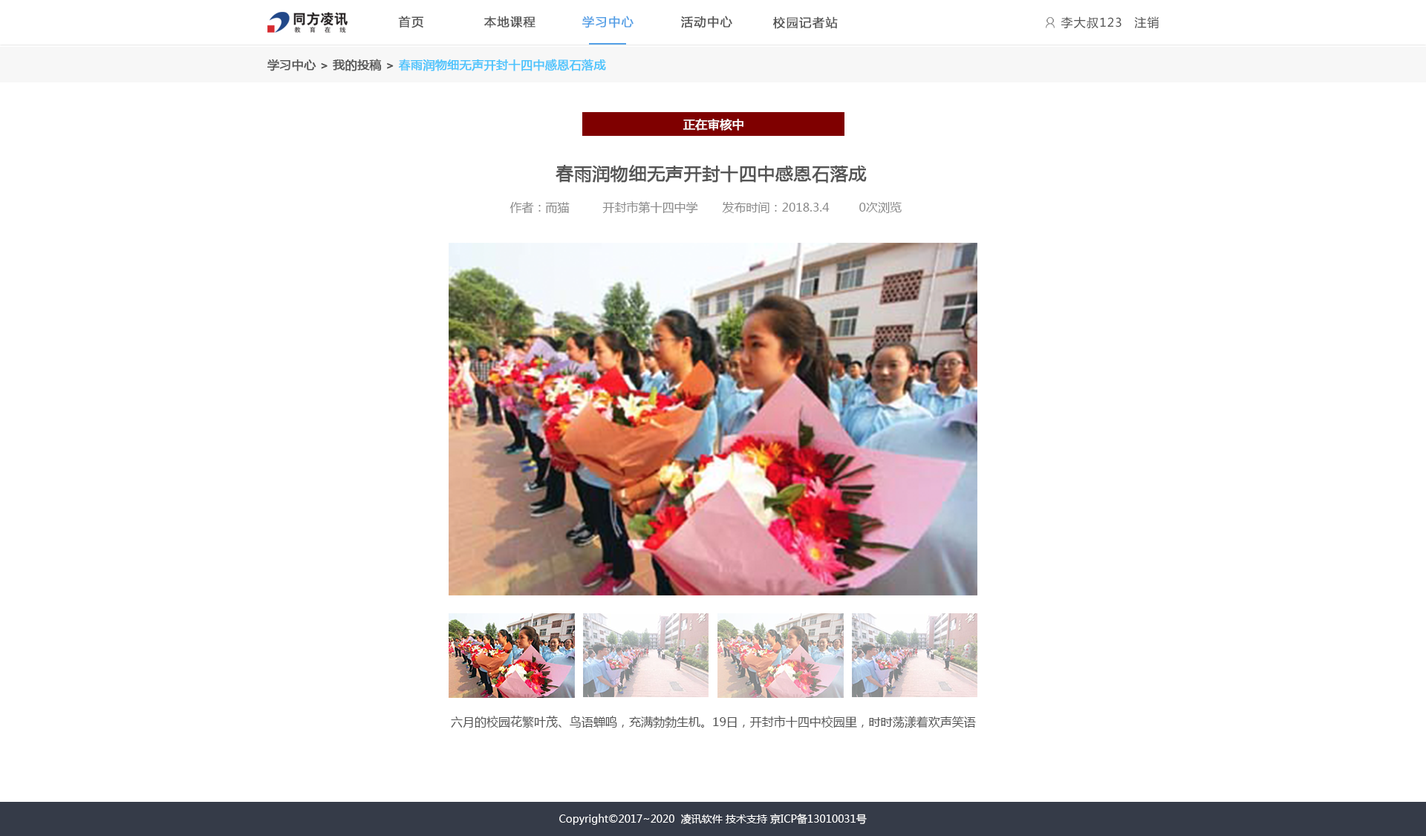
<style>
.page{position:relative;width:1426px;height:836px;background:#ffffff}
.page>*{position:absolute;margin:0}
.t1{font:11.9px "MicrosoftYaHei";letter-spacing:0.075em;color:#555555;font-weight:bold}
.t2{font:11.9px "MicrosoftYaHei";letter-spacing:0.075em;color:#54a0e6;font-weight:bold}
.t3{font:11.9px "MicrosoftYaHei";letter-spacing:0.075em;color:#555555}
.t4{font:11.9px "MicrosoftYaHei";color:#4dc4fc;font-weight:bold}
.t5{font:11.9px "MicrosoftYaHei";color:#555555;font-weight:bold}
.t6{font:11.9px "MicrosoftYaHei";color:#ffffff;font-weight:bold}
.t7{font:17.8px "MicrosoftYaHei";color:#555555;font-weight:bold}
.t8{font:11.9px "MicrosoftYaHei";color:#8a8a8a}
.t9{font:11.9px "MicrosoftYaHei";color:#555555}
.t10{font:10.4px "MicrosoftYaHei";color:#ffffff}
</style>
<div class="page">
<p class="t1" style="left:398px;top:16px;width:25px;height:12px">首页</p>
<p class="t1" style="left:484px;top:16px;width:51px;height:12px">本地课程</p>
<p class="t2" style="left:582px;top:16px;width:51px;height:12px">学习中心</p>
<p class="t1" style="left:681px;top:16px;width:51px;height:12px">活动中心</p>
<p class="t1" style="left:773px;top:16px;width:65px;height:13px">校园记者站</p>
<p class="t3" style="left:1061px;top:16px;width:60px;height:13px">李大叔123</p>
<p class="t3" style="left:1134px;top:16px;width:25px;height:12px">注销</p>
<p class="t4" style="left:267px;top:59px;width:339px;height:12px"><span class="t5">学习中心 &gt; 我的投稿 &gt;</span> 春雨润物细无声开封十四中感恩石落成</p>
<p class="t6" style="left:683px;top:119px;width:60px;height:12px">正在审核中</p>
<p class="t7" style="left:556px;top:165px;width:311px;height:18px">春雨润物细无声开封十四中感恩石落成</p>
<p class="t8" style="left:509px;top:201px;width:61px;height:13px">作者：而猫</p>
<p class="t8" style="left:602px;top:201px;width:96px;height:13px">开封市第十四中学</p>
<p class="t8" style="left:722px;top:202px;width:108px;height:11px">发布时间：2018.3.4</p>
<p class="t8" style="left:859px;top:202px;width:43px;height:11px">0次浏览</p>
<p class="t9" style="left:451px;top:716px;width:525px;height:13px">六月的校园花繁叶茂、鸟语蝉鸣，充满勃勃生机。19日，开封市十四中校园里，时时荡漾着欢声笑语。</p>
<p class="t10" style="left:559px;top:813px;width:308px;height:12px">Copyright©2017~2020  凌讯软件 技术支持 京ICP备13010031号</p>
</div>
